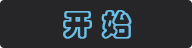
<style>
.page{position:relative;width:192px;height:48px;background:#262628}
.page>*{position:absolute;margin:0}
.t1{font:30px "STCaiyun";color:#6abde4;font-weight:bold}
</style>
<div class="page">
<p class="t1" style="left:63px;top:10px;width:69px;height:29px">开 始</p>
</div>
